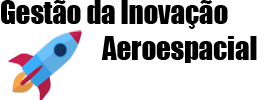
<style>
.page{position:relative;width:270px;height:100px;background:#ffffff}
.page>*{position:absolute;margin:0}
.t1{font:30px "Impact";color:#000000;scale:0.95 1}
</style>
<div class="page">
<p class="t1" style="left:1px;top:0px;width:256px;height:63px">Gestão da Inovação<br>        Aeroespacial</p>
</div>
